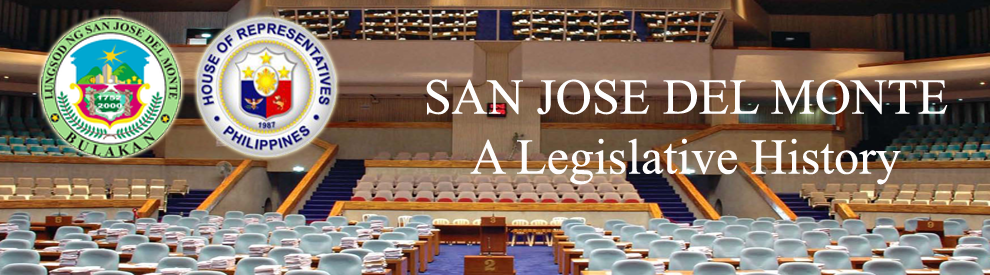
<style>
.page{position:relative;width:990px;height:275px}
.page>*{position:absolute;margin:0}
.t1{font:50px "TimesNewRomanPSMT";color:#fdfcfc}
.t2{font:50px "TimesNewRomanPSMT";color:#fdfdfd}
</style>
<div class="page">
<p class="t1" style="left:426px;top:79px;width:522px;height:106px;text-align:center"><span class="t2">SAN JOSE DEL MONTE<br></span>A Legislative History</p>
</div>
